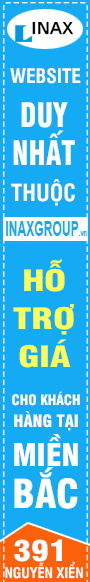
<style>
.page{position:relative;width:90px;height:582px;background:#14abf4}
.page>*{position:absolute;margin:0}
.t1{font:19.4px "UTMSwissCondensed-Bold";color:#ffffff}
.t2{font:33.1px/38.2px "UTM-Swiss-721-Black-Condensed";color:#ffffff;scale:0.85 1}
.t3{font:23.1px "UTMSwissCondensed-Bold";color:#ffffff}
.t4{font:20.7px "Arial-BoldMT";color:#14abf4;scale:0.59 1}
.t5{font:9.6px "Arial-BoldMT";color:#14abf4;scale:0.59 1}
.t6{font:28.8px/38px "UTM-Swiss-721-Black-Condensed";color:#fdff54;scale:1.29 1}
.t7{font:13.9px/22.2px "UTM-Swiss-721-Black-Condensed";color:#ffffff}
.t8{font:16.7px/22.2px "UTM-Swiss-721-Black-Condensed";color:#ffffff}
.t9{font:30.6px/38.9px "UTM-Swiss-721-Black-Condensed";color:#ffffff}
.t10{font:38.9px/41.7px "UTM-Swiss-721-Black-Condensed";color:#ffffff}
.t11{font:28.3px "UTM-Swiss-721-Black-Condensed";color:#ffffff;scale:1.19 1}
.t12{font:14.2px "UTMSwissCondensed-Bold";color:#ffffff}
</style>
<div class="page">
<p class="t1" style="left:10px;top:68px;width:71px;height:16px">WEBSITE</p>
<p class="t2" style="left:13px;top:102px;width:62px;height:63px;text-align:right">DUY <br>NHẤT</p>
<p class="t3" style="left:11px;top:179px;width:64px;height:27px">THUỘC</p>
<p class="t4" style="left:6px;top:221px;width:81px;height:15px">INAXGROUP<span class="t5">.vn</span></p>
<p class="t6" style="left:13px;top:259px;width:61px;height:109px;text-align:center">HỖ<br>TRỢ<br>GIÁ</p>
<p class="t7" style="left:12px;top:391px;width:68px;height:118px;text-align:center">CHO KHÁCH<br><span class="t8">HÀNG TẠI<br></span><span class="t9">MIỀN<br></span><span class="t10">BẮC</span></p>
<p class="t11" style="left:14px;top:539px;width:48px;height:23px">391</p>
<p class="t12" style="left:5px;top:561px;width:78px;height:18px">NGUYỄN XIỂN</p>
</div>
